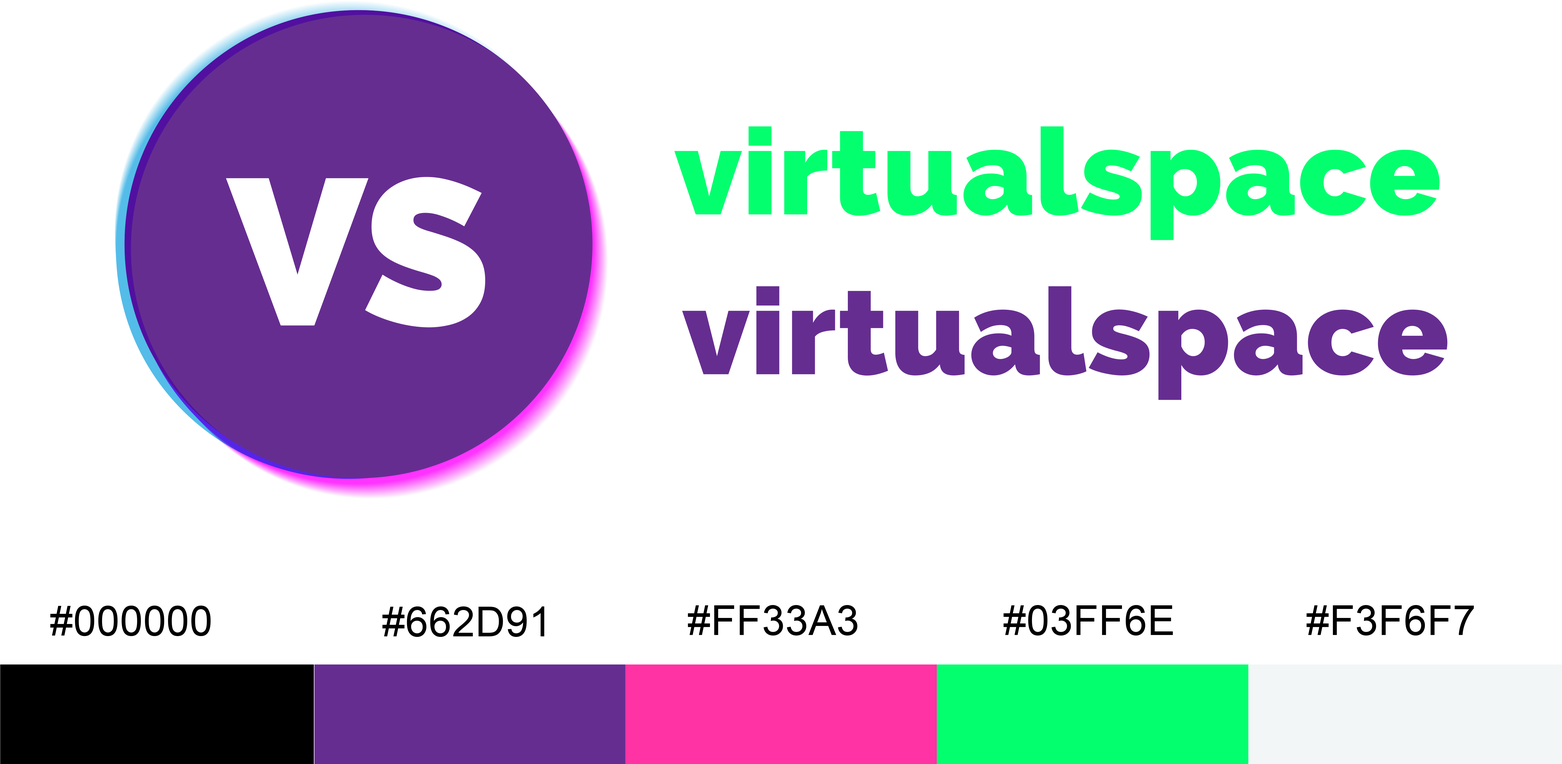
<style>
.page{position:relative;width:1562px;height:764px;background:#ffffff}
.page>*{position:absolute;margin:0}
.t1{font:41.2px "ArialMT";letter-spacing:0.01em;color:#000000}
</style>
<div class="page">
<p class="t1" style="left:50px;top:605px;width:161px;height:31px">#000000</p>
<p class="t1" style="left:688px;top:605px;width:169px;height:30px">#FF33A3</p>
<p class="t1" style="left:1003px;top:605px;width:169px;height:30px">#03FF6E</p>
<p class="t1" style="left:1306px;top:605px;width:167px;height:30px">#F3F6F7</p>
<p class="t1" style="left:382px;top:606px;width:162px;height:31px">#662D91</p>
</div>
